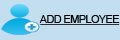
<style>
.page{position:relative;width:120px;height:40px;background:#c3dfef}
.page>*{position:absolute;margin:0}
.t1{font:11px "ArialMT";letter-spacing:-0.059em;color:#030303}
</style>
<div class="page">
<p class="t1" style="left:39px;top:15px;width:81px;height:8px">ADD EMPLOYEE</p>
</div>
